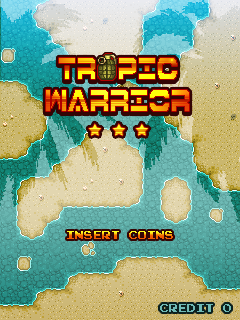
<style>
.page{position:relative;width:240px;height:320px}
.page>*{position:absolute;margin:0}
.t1{font:26px "7thServiceCondensed"}
.t2{font:9px "PressStartReg"}
.t3{font:9px "PressStartReg";color:#70bab5}
</style>
<div class="page">
<p class="t1" style="left:46px;top:60px;width:143px;height:53px;text-align:center">TROPIC<br>WARRIOR</p>
<p class="t1" style="left:46px;top:58px;width:143px;height:53px;text-align:center">TROPIC<br>WARRIOR</p>
<p class="t2" style="left:67px;top:231px;width:106px;height:8px">INSERT COINS</p>
<p class="t3" style="left:160px;top:304px;width:71px;height:8px">CREDIT 0</p>
</div>
